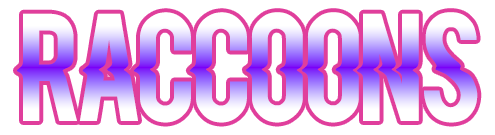
<style>
.page{position:relative;width:495px;height:135px;background:#ffffff}
.page>*{position:absolute;margin:0}
.t1{font:104.1px "Blacklisted"}
</style>
<div class="page">
<p class="t1" style="left:17px;top:12px;width:461px;height:111px">Raccoons</p>
</div>
